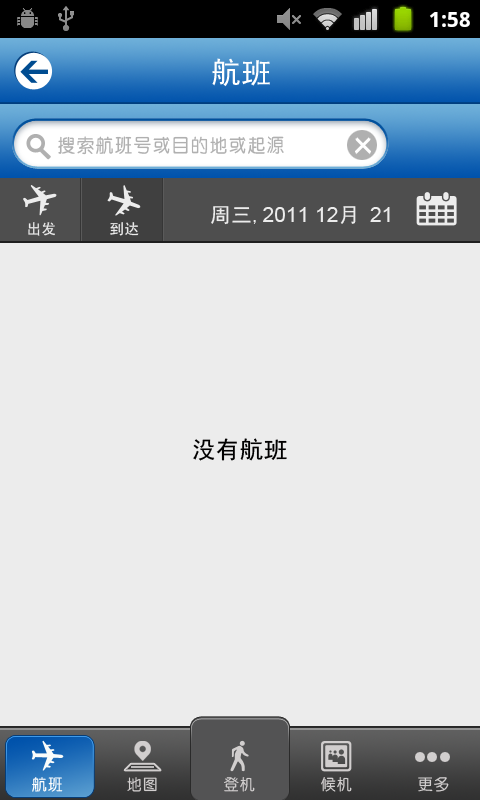
<style>
.page{position:relative;width:480px;height:800px;background:#ececec}
.page>*{position:absolute;margin:0}
.t1{font:30px "SimHei";color:#ffffff;text-transform:uppercase}
.t2{font:19px "CTZhongYuanSJ";color:#b0b0b0}
.t3{font:21px "ArialMT";color:#ececec}
.t4{font:21px "SimHei";color:#ececec}
.t5{font:14.7px "SimHei";color:#ececec}
.t6{font:24px "SimHei";color:#010000}
.t7{font:16px "CTZhongYuanSJ";color:#ffffff}
.t8{font:16px "CTZhongYuanSJ";color:#d1cece}
</style>
<div class="page">
<p class="t1" style="left:212px;top:58px;width:58px;height:29px">航班</p>
<p class="t2" style="left:58px;top:136px;width:226px;height:19px">搜索航班号或目的地或起源</p>
<p class="t3" style="left:211px;top:206px;width:179px;height:19px"><span class="t4">周三,</span>2011 12<span class="t4">月 </span>21</p>
<p class="t5" style="left:28px;top:222px;width:27px;height:14px">出发</p>
<p class="t5" style="left:110px;top:222px;width:29px;height:14px">到达</p>
<p class="t6" style="left:193px;top:438px;width:94px;height:23px">没有航班</p>
<p class="t7" style="left:32px;top:777px;width:31px;height:15px">航班</p>
<p class="t8" style="left:127px;top:777px;width:30px;height:15px">地图</p>
<p class="t8" style="left:224px;top:777px;width:31px;height:15px">登机</p>
<p class="t8" style="left:321px;top:777px;width:31px;height:15px">候机</p>
<p class="t8" style="left:418px;top:777px;width:31px;height:15px">更多</p>
</div>
